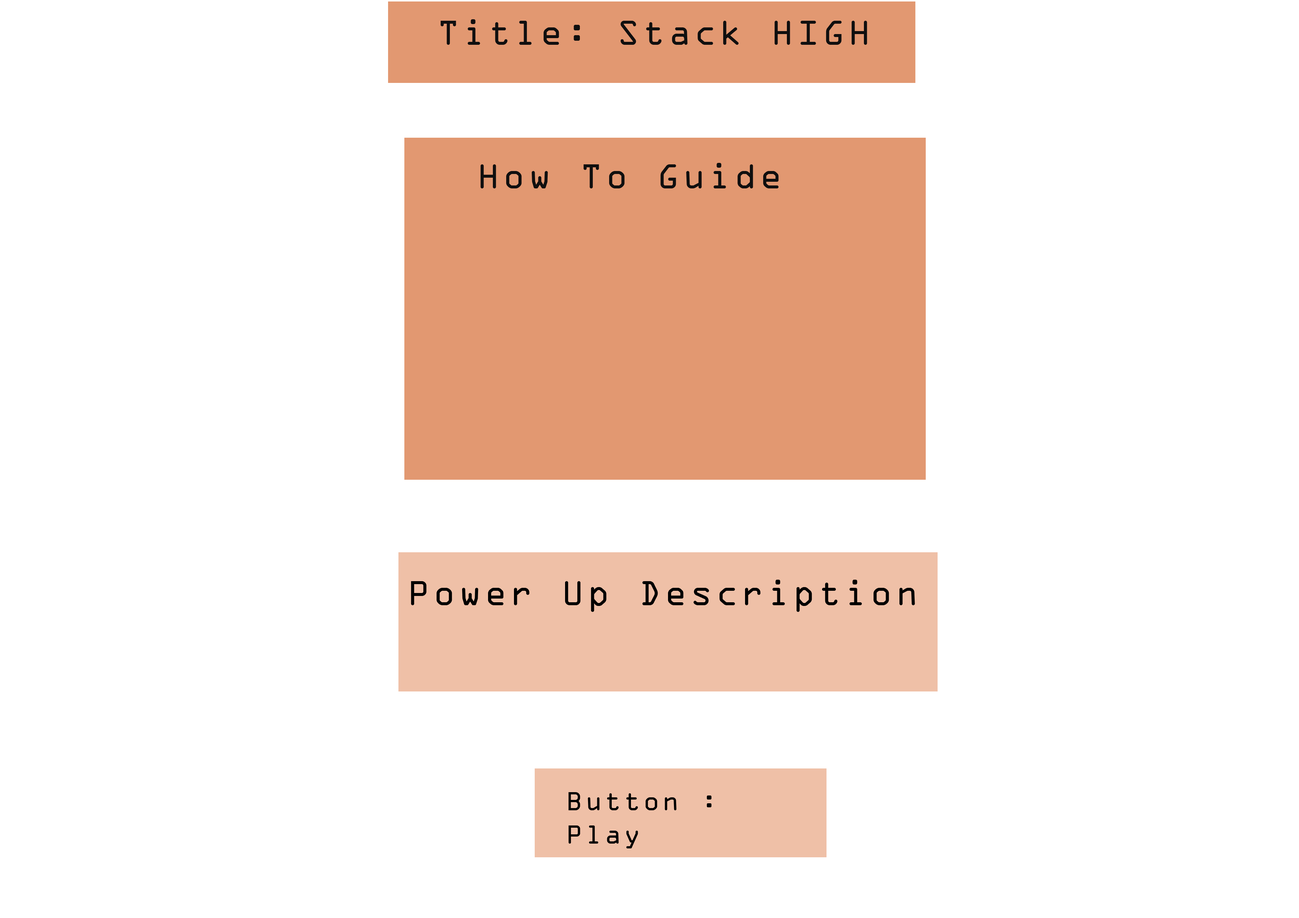
<style>
.page{position:relative;width:1299px;height:918px;background:#ffffff}
.page>*{position:absolute;margin:0}
.t1{font:37px "OCRAExtended";letter-spacing:0.09em;color:#100f0f}
.t2{font:37px "OCRAExtended";letter-spacing:0.09em;color:#000000}
.t3{font:27.8px "OCRAExtended";letter-spacing:0.09em;color:#000000}
</style>
<div class="page">
<p class="t1" style="left:441px;top:19px;width:426px;height:26px">Title: Stack HIGH</p>
<p class="t1" style="left:480px;top:163px;width:299px;height:25px">How To Guide</p>
<p class="t2" style="left:411px;top:580px;width:504px;height:32px">Power Up Description</p>
<p class="t3" style="left:568px;top:792px;width:144px;height:57px">Button : Play</p>
</div>
